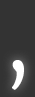
<style>
.page{position:relative;width:35px;height:97px;background:#333333}
.page>*{position:absolute;margin:0}
.t1{font:80px "Merriweather-Regular";color:#ffffff}
</style>
<div class="page">
<p class="t1" style="left:12px;top:60px;width:12px;height:30px">,</p>
</div>
